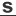
<style>
.page{position:relative;width:16px;height:16px;background:#ffffff}
.page>*{position:absolute;margin:0}
.t1{font:20px "Arial-BoldMT";letter-spacing:0.05em;color:#333333}
</style>
<div class="page">
<p class="t1" style="left:2px;top:1px;width:11px;height:12px">s</p>
</div>
